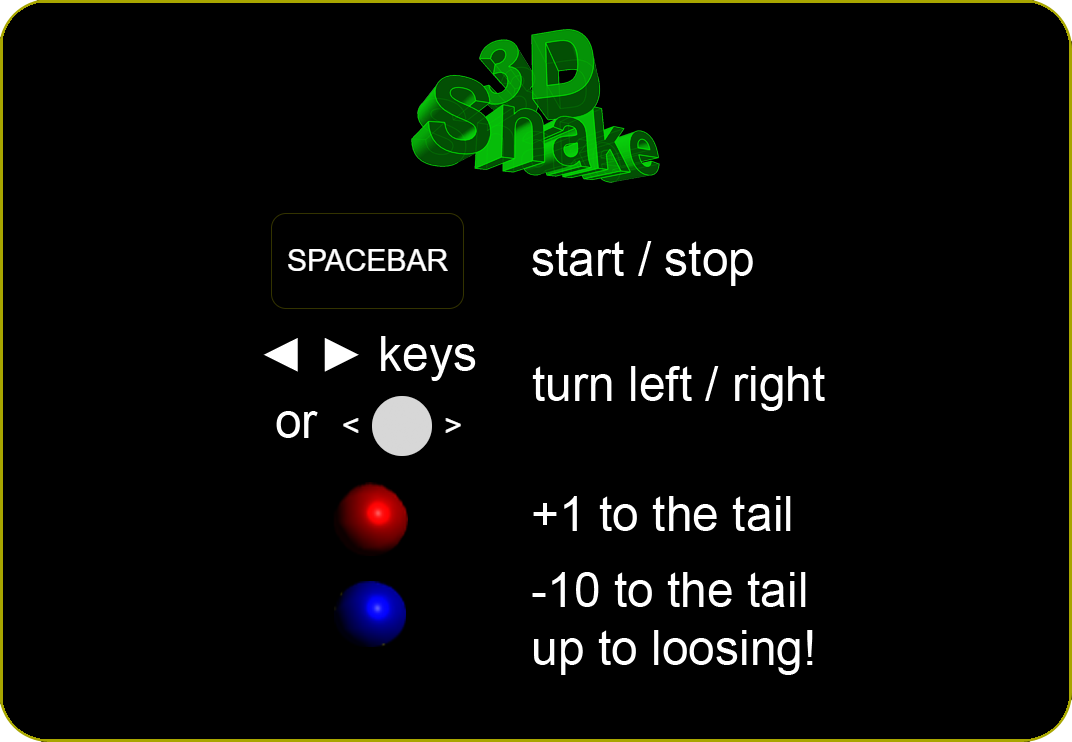
<style>
.page{position:relative;width:1072px;height:742px;background:#000000}
.page>*{position:absolute;margin:0}
.t1{font:48px "ArialMT";color:#ffffff}
</style>
<div class="page">
<p class="t1" style="left:532px;top:241px;width:221px;height:45px">start / stop</p>
<p class="t1" style="left:263px;top:336px;width:213px;height:45px">◄ ► keys</p>
<p class="t1" style="left:532px;top:366px;width:293px;height:45px">turn left / right</p>
<p class="t1" style="left:276px;top:411px;width:42px;height:27px">or</p>
<p class="t1" style="left:533px;top:496px;width:258px;height:35px">+1 to the tail</p>
<p class="t1" style="left:532px;top:572px;width:281px;height:103px">-10 to the tail<br>up to loosing!</p>
</div>
